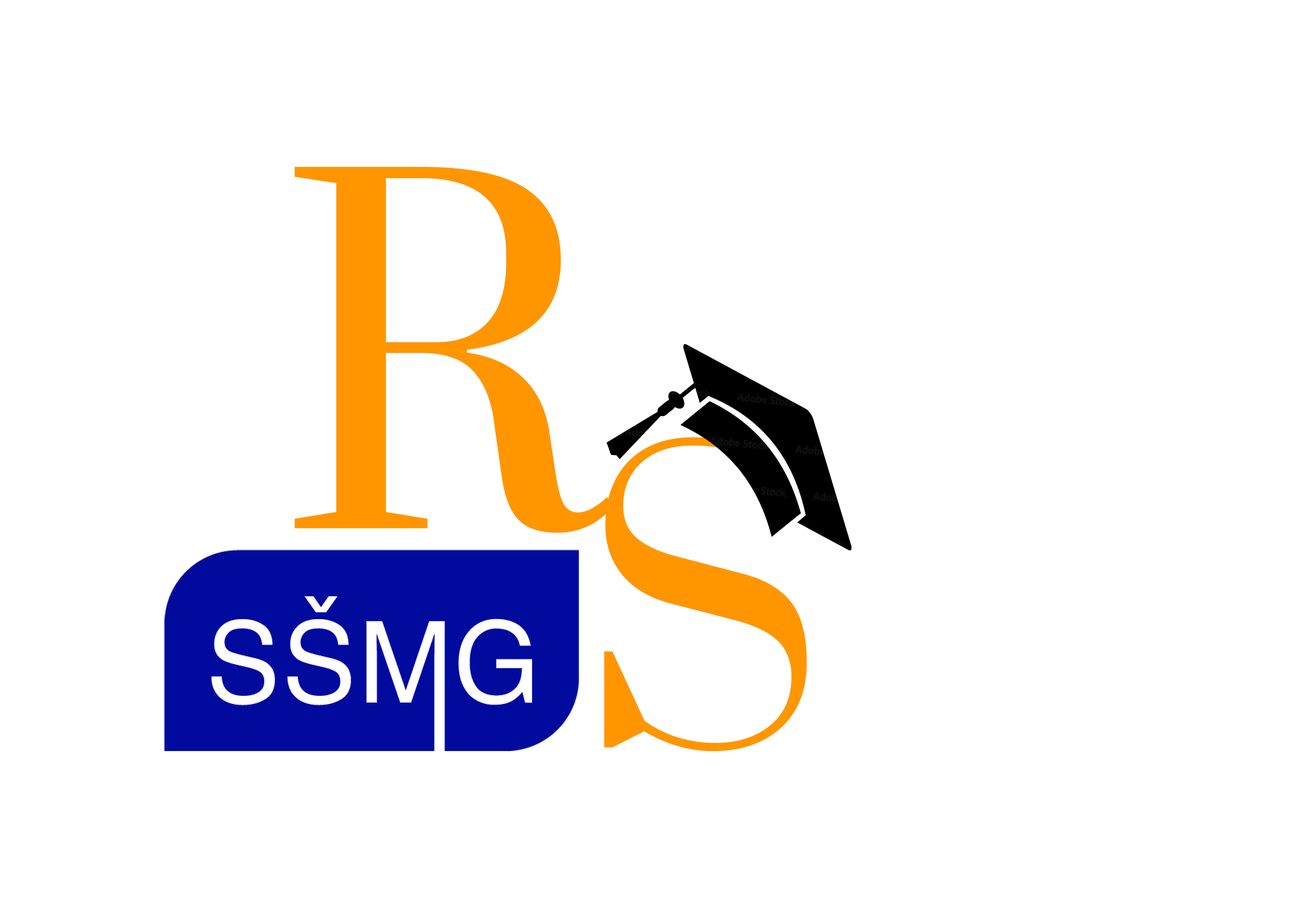
<style>
.page{position:relative;width:1299px;height:918px;background:#ffffff}
.page>*{position:absolute;margin:0}
.t1{font:451.7px "Prata-Regular";color:#ff9600}
.t2{font:373.7px "Prata-Regular";color:#ff9600}
</style>
<div class="page">
<p class="t1" style="left:294px;top:167px;width:321px;height:366px">R</p>
<p class="t2" style="left:604px;top:437px;width:203px;height:315px">S</p>
</div>
